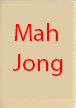
<style>
.page{position:relative;width:76px;height:108px;background:#dfcba6}
.page>*{position:absolute;margin:0}
.t1{font:25px "MyriadPro-Regular";color:#f80404}
</style>
<div class="page">
<p class="t1" style="left:12px;top:23px;width:51px;height:53px">Mah<br>Jong</p>
</div>
